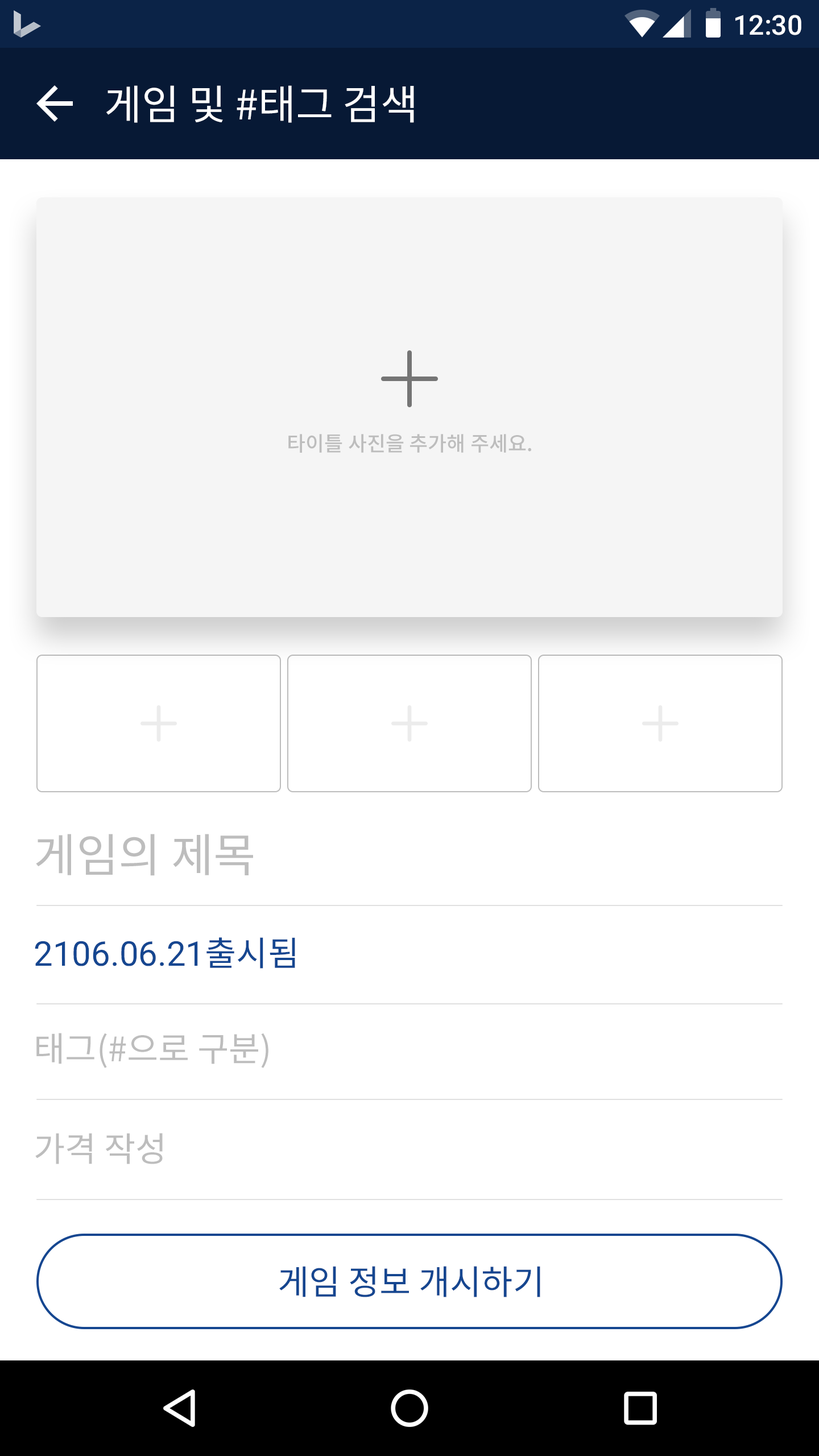
<style>
.page{position:relative;width:819px;height:1456px;background:#ffffff}
.page>*{position:absolute;margin:0}
.t1{font:27.3px "Roboto-Medium";color:#ffffff}
.t2{font:40.9px "NotoSansCJKkr-Regular";color:#ffffff}
.t3{font:20.5px "NotoSansCJKkr-Medium";color:#bdbdbd}
.t4{font:46.1px "NotoSansCJKkr-Regular";color:#bdbdbd}
.t5{font:34.1px "Roboto-Regular";color:#154690}
.t6{font:34.1px "NotoSansCJKkr-Regular";color:#154690}
.t7{font:34.1px "NotoSansCJKkr-Regular";color:#bdbdbd}
</style>
<div class="page">
<p class="t1" style="left:735px;top:15px;width:66px;height:20px">12:30</p>
<p class="t2" style="left:106px;top:85px;width:308px;height:38px">게임 및 #태그 검색</p>
<p class="t3" style="left:288px;top:434px;width:243px;height:19px">타이틀 사진을 추가해 주세요.</p>
<p class="t4" style="left:36px;top:834px;width:217px;height:42px">게임의 제목</p>
<p class="t5" style="left:35px;top:937px;width:260px;height:32px">2106.06.21<span class="t6">출시됨</span></p>
<p class="t7" style="left:36px;top:1033px;width:232px;height:35px">태그(#으로 구분)</p>
<p class="t7" style="left:35px;top:1133px;width:128px;height:31px">가격 작성</p>
<p class="t6" style="left:279px;top:1266px;width:261px;height:31px">게임 정보 개시하기</p>
</div>
